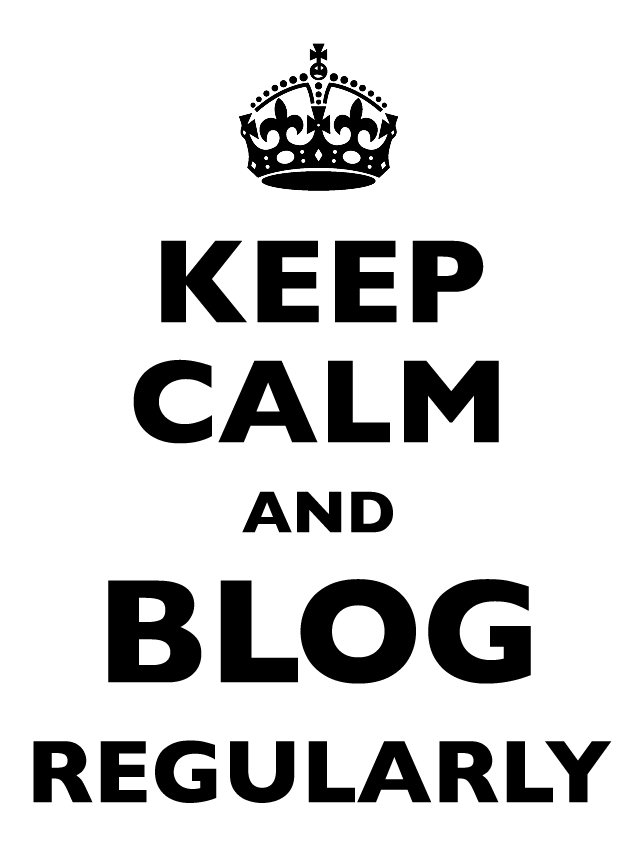
<style>
.page{position:relative;width:638px;height:841px;background:#ffffff}
.page>*{position:absolute;margin:0}
.t1{font:120px/120px "GillSans-Bold";color:#000000}
.t2{font:60px/90px "GillSans-Bold";color:#000000}
.t3{font:150px/150px "GillSans-Bold";color:#000000}
.t4{font:90px/120px "GillSans-Bold";color:#000000}
</style>
<div class="page">
<p class="t1" style="left:33px;top:240px;width:579px;height:563px;text-align:center">KEEP<br>CALM<br><span class="t2">AND<br></span><span class="t3">BLOG<br></span><span class="t4">REGULARLY</span></p>
</div>
